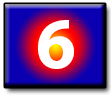
<style>
.page{position:relative;width:111px;height:96px}
.page>*{position:absolute;margin:0}
.t1{font:72px "MyriadPro-Bold";color:#ffffff}
</style>
<div class="page">
<p class="t1" style="left:38px;top:20px;width:36px;height:49px">6</p>
</div>
